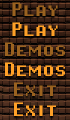
<style>
.page{position:relative;width:70px;height:120px}
.page>*{position:absolute;margin:0}
.t1{font:24px "PixelOperatorHBSC";color:#9a6220}
.t2{font:24px "PixelOperatorHBSC";color:#ffa128}
</style>
<div class="page">
<p class="t1" style="left:12px;top:2px;width:46px;height:14px">Play</p>
<p class="t2" style="left:12px;top:22px;width:46px;height:14px">Play</p>
<p class="t1" style="left:5px;top:42px;width:60px;height:14px">Demos</p>
<p class="t2" style="left:5px;top:62px;width:60px;height:14px">Demos</p>
<p class="t1" style="left:14px;top:82px;width:42px;height:14px">Exit</p>
<p class="t2" style="left:14px;top:102px;width:42px;height:14px">Exit</p>
</div>
